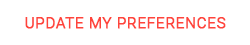
<style>
.page{position:relative;width:250px;height:45px;background:#ffffff}
.page>*{position:absolute;margin:0}
.t1{font:15px "Roboto-Light";letter-spacing:0.03em;color:#ff443b;text-transform:uppercase;font-weight:bold}
</style>
<div class="page">
<p class="t1" style="left:25px;top:17px;width:201px;height:12px">Update MY Preferences</p>
</div>
